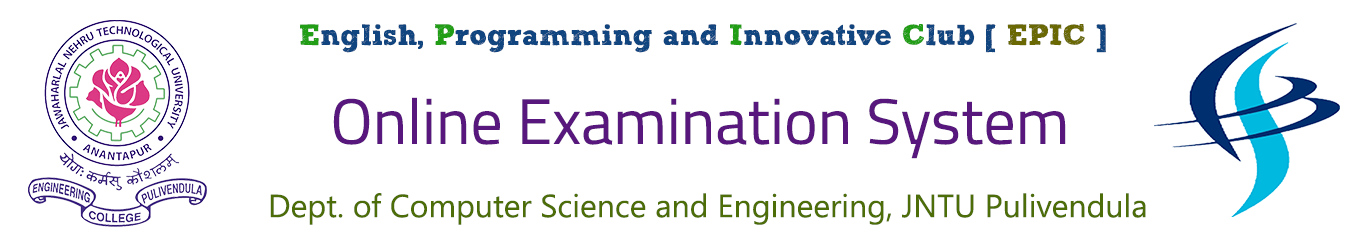
<style>
.page{position:relative;width:1366px;height:240px;background:#ffffff}
.page>*{position:absolute;margin:0}
.t1{font:50px "SketchRockwell";color:#114580}
.t2{font:50px "SketchRockwell";color:#229d16}
.t3{font:50px "SketchRockwell";color:#696802}
.t4{font:110px "TitilliumWeb-Regular";color:#58177d}
.t5{font:55px "SegoeUISymbol";color:#4d6d08}
</style>
<div class="page">
<p class="t1" style="left:300px;top:24px;width:806px;height:29px"><span class="t2">E</span>nglish,<span class="t2"> P</span>rogramming and <span class="t2">I</span>nnovative <span class="t2">C</span>lub [ <span class="t3">EPIC </span>]</p>
<p class="t4" style="left:333px;top:97px;width:733px;height:62px">Online Examination System</p>
<p class="t5" style="left:270px;top:193px;width:876px;height:32px">Dept. of Computer Science and Engineering, JNTU Pulivendula</p>
</div>
